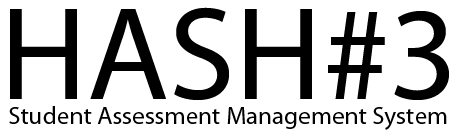
<style>
.page{position:relative;width:454px;height:131px;background:#ffffff}
.page>*{position:absolute;margin:0}
.t1{font:134px "MyriadPro-Regular";color:#000000}
.t2{font:25.1px "MyriadPro-Regular";color:#000000}
</style>
<div class="page">
<p class="t1" style="left:10px;top:7px;width:439px;height:93px">HASH#3</p>
<p class="t2" style="left:9px;top:106px;width:438px;height:24px">Student Assessment Management System</p>
</div>
